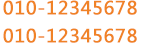
<style>
.page{position:relative;width:155px;height:45px;background:#ffffff}
.page>*{position:absolute;margin:0}
.t1{font:18px "MicrosoftYaHei";letter-spacing:0.025em;color:#f08226;font-weight:bold}
</style>
<div class="page">
<p class="t1" style="left:3px;top:0px;width:134px;height:15px">010-12345678</p>
<p class="t1" style="left:3px;top:28px;width:134px;height:15px">010-12345678</p>
</div>
